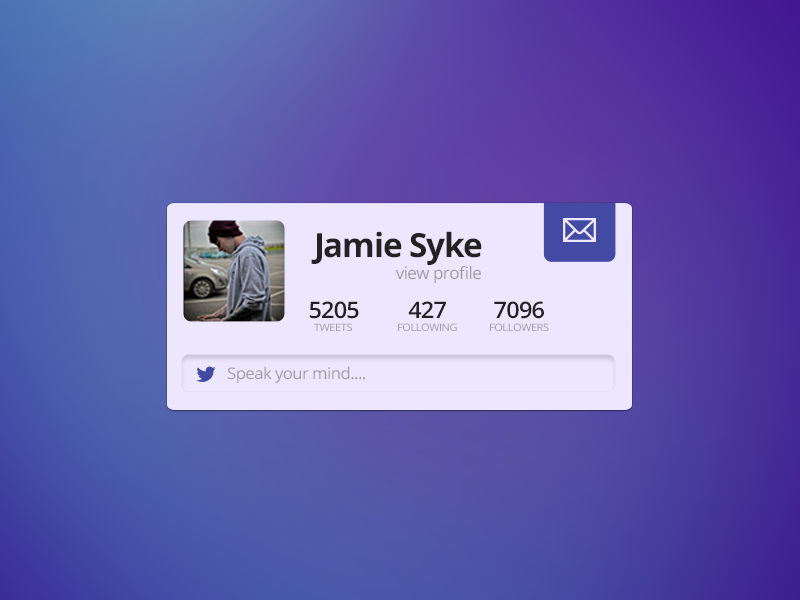
<style>
.page{position:relative;width:800px;height:600px}
.page>*{position:absolute;margin:0}
.t1{font:33.2px "OpenSans-Bold";letter-spacing:-0.035em;color:#222222}
.t2{font:17px "OpenSans";letter-spacing:-0.035em;color:#9d9d9d}
.t3{font:22.7px "OpenSans-Semibold";letter-spacing:-0.035em;color:#222222;scale:1.04 1}
.t4{font:10.2px "OpenSans";letter-spacing:-0.035em;color:#9d9d9d;scale:1.07 1}
.t5{font:15.9px "OpenSans";letter-spacing:-0.035em;color:#9d9d9d;scale:1.06 1}
</style>
<div class="page">
<p class="t1" style="left:311px;top:231px;width:171px;height:34px">Jamie Syke</p>
<p class="t2" style="left:395px;top:266px;width:86px;height:17px">view profile</p>
<p class="t3" style="left:309px;top:301px;width:50px;height:18px">5205</p>
<p class="t3" style="left:408px;top:301px;width:38px;height:17px">427</p>
<p class="t3" style="left:494px;top:301px;width:50px;height:18px">7096</p>
<p class="t4" style="left:314px;top:323px;width:38px;height:8px">TWEETS</p>
<p class="t4" style="left:398px;top:323px;width:59px;height:8px">FOLLOWING</p>
<p class="t4" style="left:490px;top:323px;width:59px;height:8px">FOLLOWERS</p>
<p class="t5" style="left:227px;top:366px;width:138px;height:17px">Speak your mind....</p>
</div>
